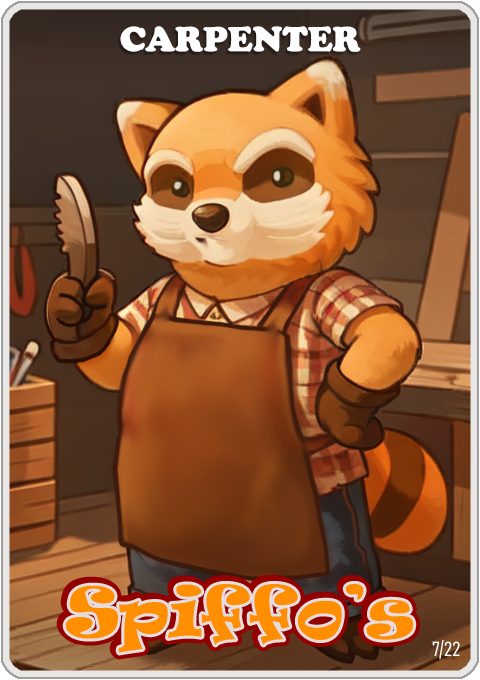
<style>
.page{position:relative;width:480px;height:680px}
.page>*{position:absolute;margin:0}
.t1{font:36px "CooperBlack";color:#ffffff}
.t2{font:65px "Ravie";color:#ff8e00}
.t3{font:20px "Bahnschrift-LightCondensed";color:#ffffff}
</style>
<div class="page">
<p class="t1" style="left:120px;top:26px;width:241px;height:26px">CARPENTER</p>
<p class="t2" style="left:65px;top:584px;width:349px;height:69px">Spiffo’s</p>
<p class="t3" style="left:432px;top:640px;width:28px;height:19px">7/22</p>
</div>
